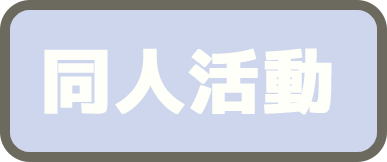
<style>
.page{position:relative;width:387px;height:162px;background:#ced6ed}
.page>*{position:absolute;margin:0}
.t1{font:72px "07LightNovelPOP";color:#fefff9;font-weight:bold}
</style>
<div class="page">
<p class="t1" style="left:44px;top:48px;width:288px;height:67px">同人活動</p>
</div>
